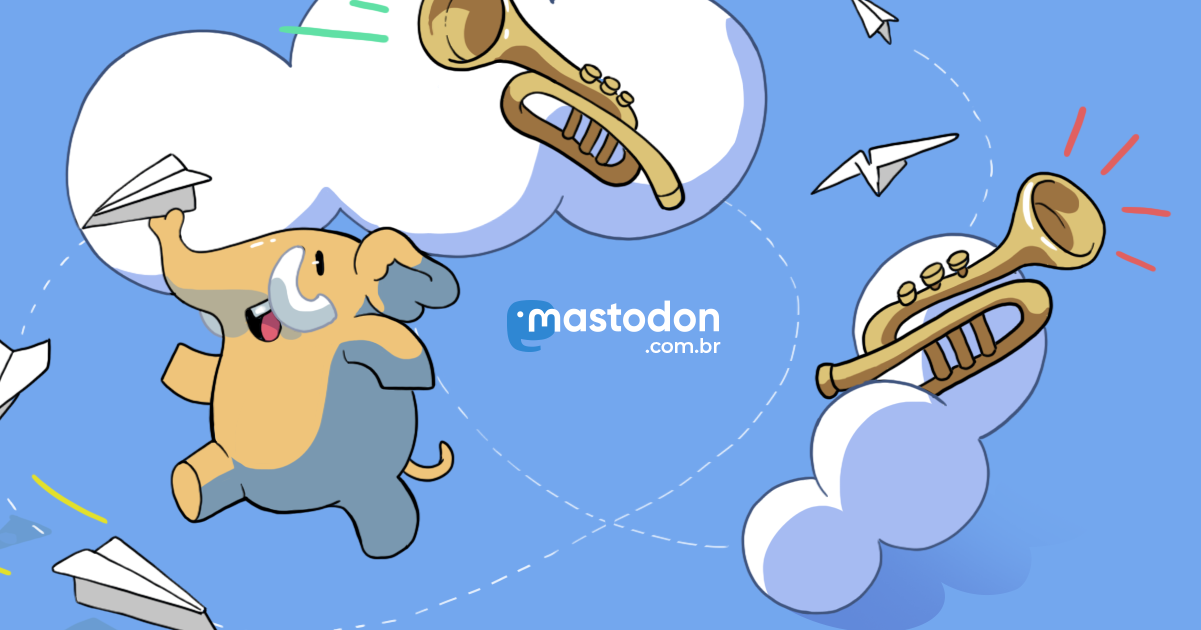
<style>
.page{position:relative;width:1201px;height:630px;background:#73a7ee}
.page>*{position:absolute;margin:0}
.t1{font:20px "MontserratAlternates-SemiBold";letter-spacing:-0.01em;color:#ffffff}
</style>
<div class="page">
<p class="t1" style="left:645px;top:338px;width:76px;height:15px">.com.br</p>
</div>
